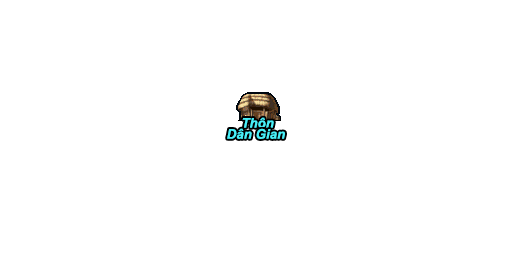
<style>
.page{position:relative;width:512px;height:256px;background:#ffffff}
.page>*{position:absolute;margin:0}
.t1{font:13.3px "Arial-BoldItalicMT";color:#48f0f8}
</style>
<div class="page">
<p class="t1" style="left:242px;top:117px;width:32px;height:11px">Thôn</p>
<p class="t1" style="left:227px;top:128px;width:58px;height:11px">Dân Gian</p>
</div>
